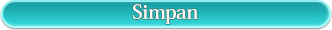
<style>
.page{position:relative;width:332px;height:30px}
.page>*{position:absolute;margin:0}
.t1{font:20px "HeiseiMinStd-W7";color:#fffaf4}
</style>
<div class="page">
<p class="t1" style="left:132px;top:4px;width:66px;height:20px">Simpan</p>
</div>
